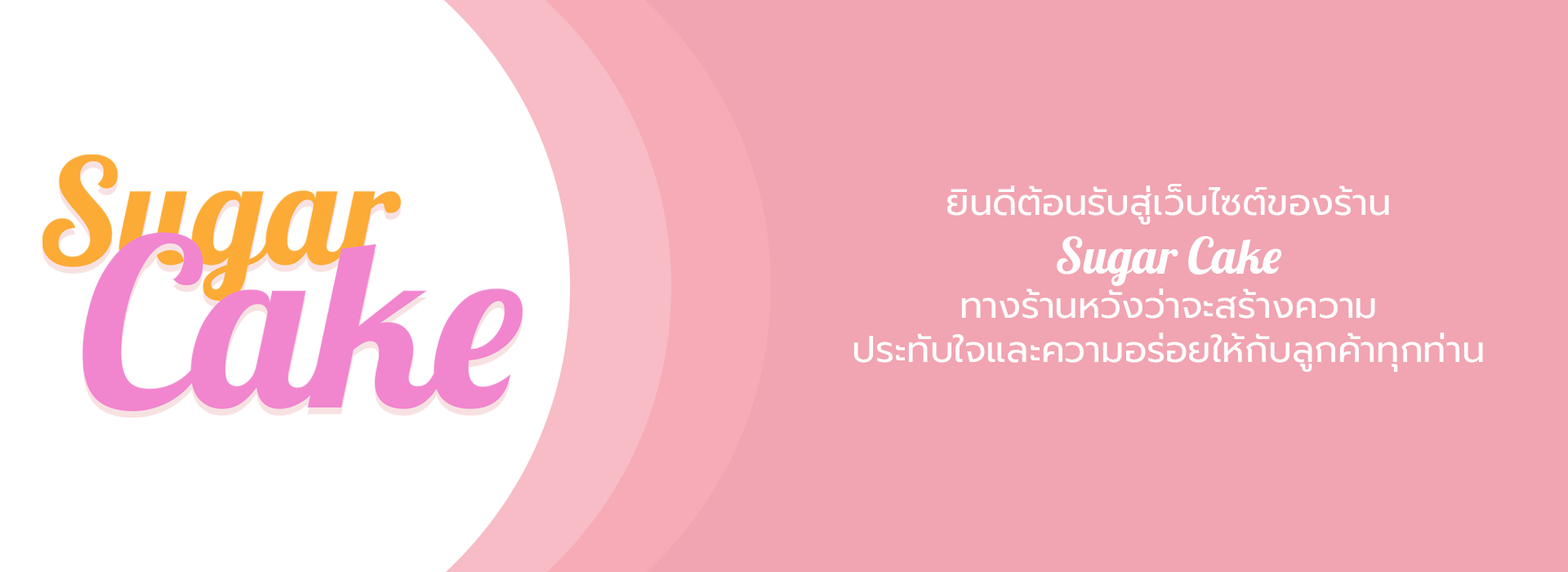
<style>
.page{position:relative;width:1568px;height:572px;background:#f1a4b1}
.page>*{position:absolute;margin:0}
.t1{font:36.8px "Prompt-Regular";color:#ffffff}
.t2{font:49px "Lobster-Regular";color:#ffffff}
</style>
<div class="page">
<p class="t1" style="left:853px;top:184px;width:630px;height:188px;text-align:center">ยินดีต้อนรับสู่เว็บไซต์ของร้าน<br><span class="t2">Sugar Cake<br></span>ทางร้านหวังว่าจะสร้างความ<br>ประทับใจและความอร่อยให้กับลูกค้าทุกท่าน</p>
</div>
